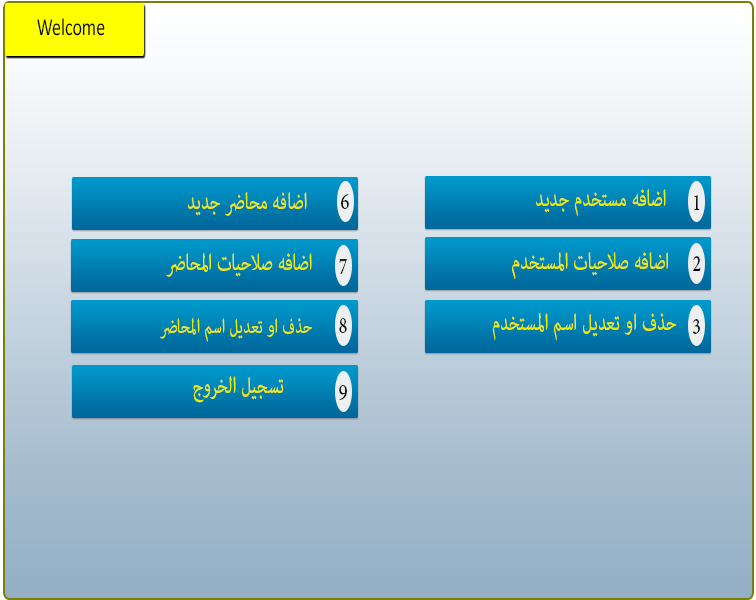
<style>
.page{position:relative;width:756px;height:600px}
.page>*{position:absolute;margin:0}
.t1{font:24.5px "Calibri";color:#0e0e0e;scale:0.73 1}
.t2{font:32.7px "AdobeArabic-Regular";color:#eeeb07;scale:0.73 1}
.t3{font:32.7px "AdobeArabic-Regular";color:#0e0e0e;scale:0.73 1}
.t4{font:32.7px "AdobeArabic-Regular";color:#0f0f0f;scale:0.73 1}
.t5{font:32.7px "AdobeArabic-Regular";scale:0.73 1}
.t6{font:32.7px "AdobeArabic-Regular";color:#242424;scale:0.73 1}
.t7{font:28.6px "AdobeArabic-Regular";color:#eeeb07;scale:0.73 1}
.t8{font:32.7px "AdobeArabic-Regular";color:#101010;scale:0.73 1}
.t9{font:32.7px "AdobeArabic-Regular";color:#141414;scale:0.73 1}
.t10{font:32.7px "AdobeArabic-Regular";color:#151515;scale:0.73 1}
</style>
<div class="page">
<p class="t1" style="left:37px;top:18px;width:68px;height:18px">Welcome</p>
<p class="t2" style="left:188px;top:192px;width:119px;height:24px">اضافه محاضر جديد</p>
<p class="t3" style="left:341px;top:194px;width:8px;height:15px">6</p>
<p class="t2" style="left:536px;top:189px;width:130px;height:28px">اضافه مستخدم جديد</p>
<p class="t4" style="left:694px;top:195px;width:6px;height:15px">1</p>
<p class="t2" style="left:166px;top:253px;width:146px;height:24px">اضافه صلاحيات المحاضر</p>
<p class="t2" style="left:512px;top:252px;width:156px;height:28px">اضافه صلاحيات المستخدم</p>
<p class="t5" style="left:693px;top:256px;width:8px;height:15px">2</p>
<p class="t6" style="left:339px;top:259px;width:8px;height:15px">7</p>
<p class="t7" style="left:160px;top:318px;width:152px;height:24px">حذف او تعديل اسم المحاضر</p>
<p class="t8" style="left:339px;top:318px;width:8px;height:15px">8</p>
<p class="t2" style="left:492px;top:313px;width:185px;height:28px">حذف او تعديل اسم المستخدم</p>
<p class="t9" style="left:693px;top:319px;width:7px;height:15px">3</p>
<p class="t2" style="left:193px;top:376px;width:91px;height:27px">تسجيل الخروج</p>
<p class="t10" style="left:339px;top:385px;width:8px;height:15px">9</p>
</div>
